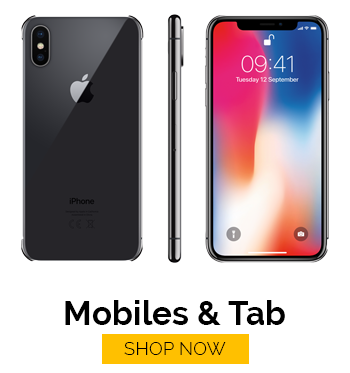
<style>
.page{position:relative;width:350px;height:373px;background:#ffffff}
.page>*{position:absolute;margin:0}
.t1{font:33.3px "Raleway-Bold";color:#000000}
.t2{font:18.5px "Raleway-Light";color:#000000}
</style>
<div class="page">
<p class="t1" style="left:65px;top:300px;width:220px;height:25px">Mobiles &amp; Tab</p>
<p class="t2" style="left:124px;top:342px;width:102px;height:13px">SHOP NOW</p>
</div>
